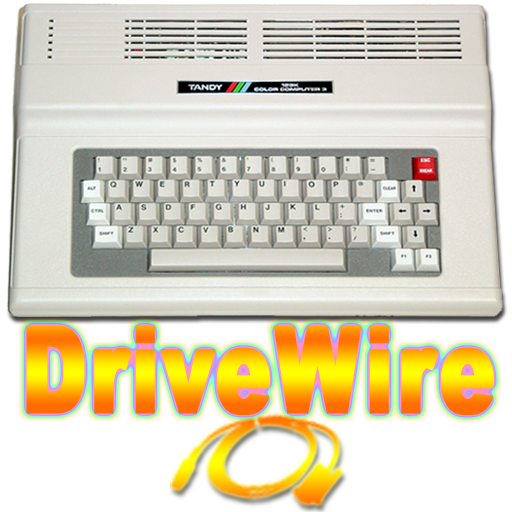
<style>
.page{position:relative;width:512px;height:512px}
.page>*{position:absolute;margin:0}
.t1{font:121px "Arial-Black";letter-spacing:0.01em;font-weight:bold;scale:0.7 1}
</style>
<div class="page">
<p class="t1" style="left:26px;top:325px;width:468px;height:90px">DriveWire</p>
</div>
